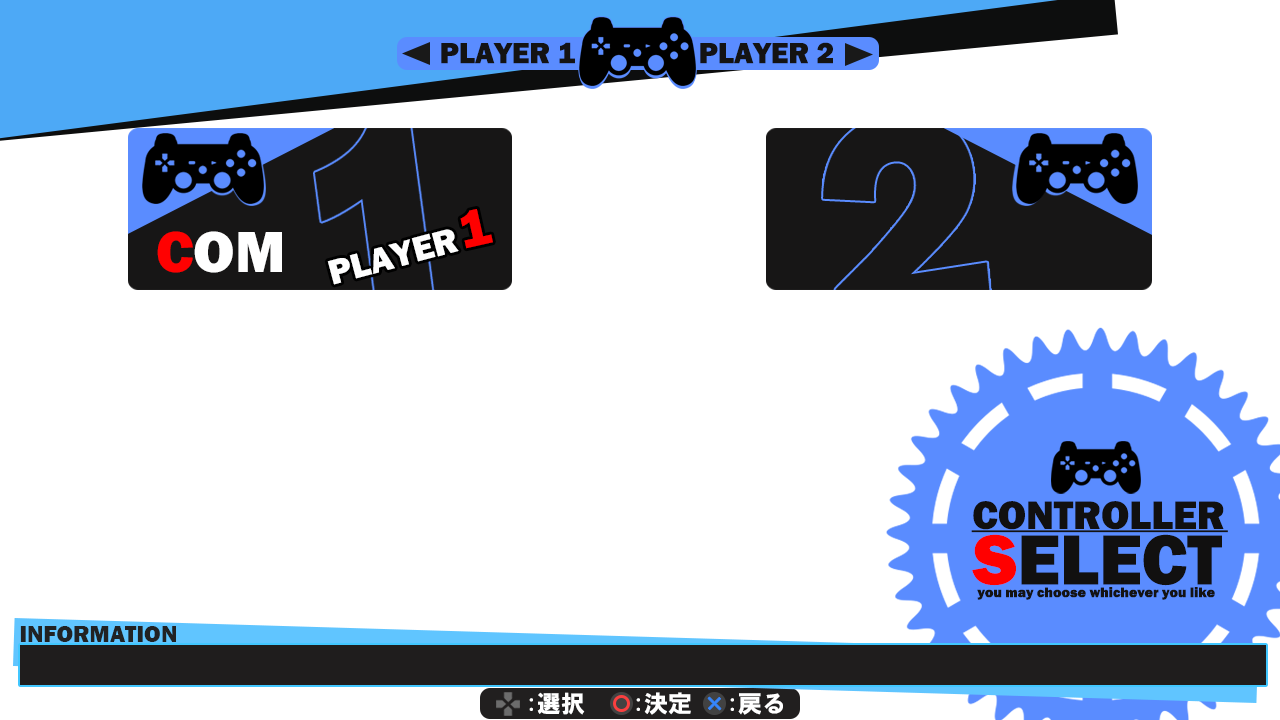
<style>
.page{position:relative;width:1280px;height:720px;background:#ffffff}
.page>*{position:absolute;margin:0}
.t1{font:30px "FranklinGothic-Heavy";color:#141313}
.t2{font:53.3px "FranklinGothic-Heavy";color:#ff0000}
.t3{font:60px "FranklinGothic-Heavy";color:#ffffff}
.t4{font:60px "FranklinGothic-Heavy";color:#ff0101}
.t5{font:36px "FranklinGothic-Heavy";color:#fefefe}
.t6{font:40.7px "FranklinGothic-Heavy";color:#111010}
.t7{font:72.9px "FranklinGothic-Heavy";color:#111010}
.t8{font:72.9px "FranklinGothic-Heavy";color:#ff0000}
.t9{font:14.3px "FranklinGothic-Heavy";color:#141313}
.t10{font:24px "FranklinGothic-Heavy";color:#212223}
.t11{font:24px "HGSoeiKakugothicUB";color:#ffffff}
</style>
<div class="page">
<p class="t1" style="left:441px;top:42px;width:134px;height:22px">PLAYER 1</p>
<p class="t1" style="left:700px;top:42px;width:133px;height:22px">PLAYER 2</p>
<p class="t2" style="left:460px;top:209px;width:33px;height:40px;rotate:-13deg">1</p>
<p class="t3" style="left:157px;top:231px;width:125px;height:42px"><span class="t4">C</span>OM</p>
<p class="t5" style="left:327px;top:229px;width:132px;height:56px;rotate:-15deg">PLAYER</p>
<p class="t6" style="left:973px;top:501px;width:251px;height:29px">CONTROLLER</p>
<p class="t7" style="left:972px;top:534px;width:250px;height:52px"><span class="t8">S</span>ELECT</p>
<p class="t9" style="left:977px;top:587px;width:238px;height:13px">you may choose whichever you like</p>
<p class="t10" style="left:20px;top:626px;width:156px;height:16px">INFORMATION</p>
<p class="t11" style="left:529px;top:692px;width:56px;height:23px">:選択</p>
<p class="t11" style="left:636px;top:692px;width:55px;height:23px">:決定</p>
<p class="t11" style="left:730px;top:693px;width:53px;height:22px">:戻る</p>
</div>
